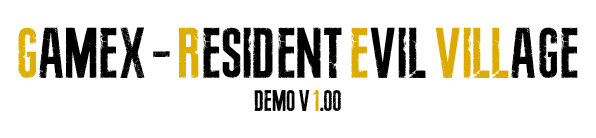
<style>
.page{position:relative;width:596px;height:138px;background:#ffffff}
.page>*{position:absolute;margin:0}
.t1{font:72px "ResidentEvil3RemakeFont";color:#000000}
.t2{font:72px "ResidentEvil3RemakeFont";color:#dcaf00}
.t3{font:72px "ResidentEvil3RemakeFont";color:#dcaa00}
.t4{font:30px "ResidentEvil3RemakeFont";color:#000000}
.t5{font:30px "ResidentEvil3RemakeFont";color:#dcaa00}
.t6{font:30px "ResidentEvil3RemakeFont";color:#010101}
</style>
<div class="page">
<p class="t1" style="left:18px;top:27px;width:560px;height:51px"><span class="t2">G</span>amex - <span class="t2">R</span>esident <span class="t3">e</span>vil <span class="t3">vill</span>age</p>
<p class="t4" style="left:254px;top:90px;width:87px;height:21px">Demo v <span class="t5">1</span><span class="t6">.00</span></p>
</div>
